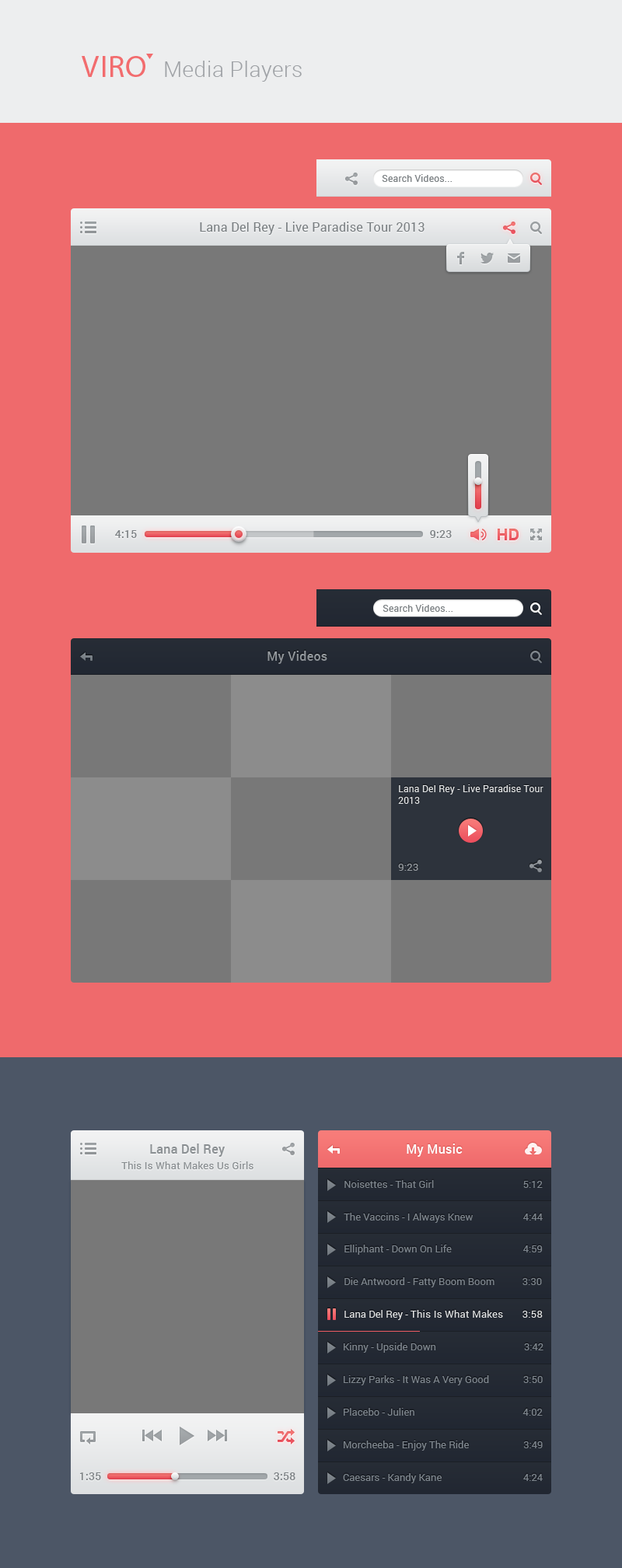
<style>
.page{position:relative;width:622px;height:1568px;background:#787878}
.page>*{position:absolute;margin:0}
.t1{font:31.1px "MyriadPro-Regular";letter-spacing:0.02em;color:#f26c6e}
.t2{font:21.8px "Roboto-Light";letter-spacing:0.02em;color:#9fa2a6}
.t3{font:9.3px "Roboto-Regular";letter-spacing:0.02em;color:#7a7f82}
.t4{font:12.4px "Roboto-Regular";letter-spacing:0.02em;color:#7a7f82}
.t5{font:10.9px "Roboto-Medium";letter-spacing:0.02em;color:#7f8487}
.t6{font:12.4px "Roboto-Medium";letter-spacing:0.02em;color:#91969b}
.t7{font:9.3px/11.7px "Roboto-Regular";letter-spacing:0.02em;color:#e0e2e3}
.t8{font:10.1px "Roboto-Regular";letter-spacing:0.02em;color:#989da2}
.t9{font:12.4px "Roboto-Medium";letter-spacing:0.02em;color:#8d9295}
.t10{font:12.4px "Roboto-Medium";letter-spacing:0.02em;color:#ffffff}
.t11{font:10.1px "Roboto-Regular";letter-spacing:0.02em;color:#8a8f92}
.t12{font:10.1px/32.6px "Roboto-Regular";color:#7e868e}
.t13{font:10.1px/32.6px "Roboto-Regular";color:#e0e2e3}
.t14{font:10.1px/25.9px "Roboto-Regular";letter-spacing:0.02em;color:#e0e2e3}
</style>
<div class="page">
<p class="t1" style="left:82px;top:56px;width:63px;height:21px">VIRO</p>
<p class="t2" style="left:165px;top:61px;width:137px;height:21px">Media Players</p>
<p class="t3" style="left:382px;top:174px;width:70px;height:8px">Search Videos...</p>
<p class="t4" style="left:200px;top:222px;width:224px;height:13px">Lana Del Rey - Live Paradise Tour 2013</p>
<p class="t5" style="left:115px;top:530px;width:22px;height:8px">4:15</p>
<p class="t5" style="left:430px;top:530px;width:22px;height:8px">9:23</p>
<p class="t3" style="left:382px;top:604px;width:70px;height:8px">Search Videos...</p>
<p class="t6" style="left:267px;top:651px;width:60px;height:13px">My Videos</p>
<p class="t7" style="left:398px;top:784px;width:145px;height:20px">Lana Del Rey - Live Paradise Tour <br>2013</p>
<p class="t8" style="left:398px;top:864px;width:20px;height:7px">9:23</p>
<p class="t9" style="left:150px;top:1144px;width:75px;height:13px">Lana Del Rey</p>
<p class="t10" style="left:407px;top:1144px;width:56px;height:13px">My Music</p>
<p class="t11" style="left:121px;top:1161px;width:132px;height:8px">This Is What Makes Us Girls</p>
<p class="t12" style="left:343px;top:1180px;width:200px;height:303px">Noisettes - That Girl                                   5:12<br>The Vaccins - I Always Knew                    4:44<br>Elliphant - Down On Life                            4:59<br>Die Antwoord - Fatty Boom Boom           3:30<br><span class="t13">Lana Del Rey - </span><span class="t14">This Is What Makes       3:58<br></span>Kinny - Upside Down                                   3:42<br>Lizzy Parks - It Was A Very Good              3:50<br>Placebo - Julien                                           4:02<br>Morcheeba - Enjoy The Ride                      3:49<br>Caesars - Kandy Kane                                4:24</p>
<p class="t5" style="left:79px;top:1472px;width:22px;height:8px">1:35</p>
<p class="t5" style="left:274px;top:1472px;width:21px;height:8px">3:58</p>
</div>
